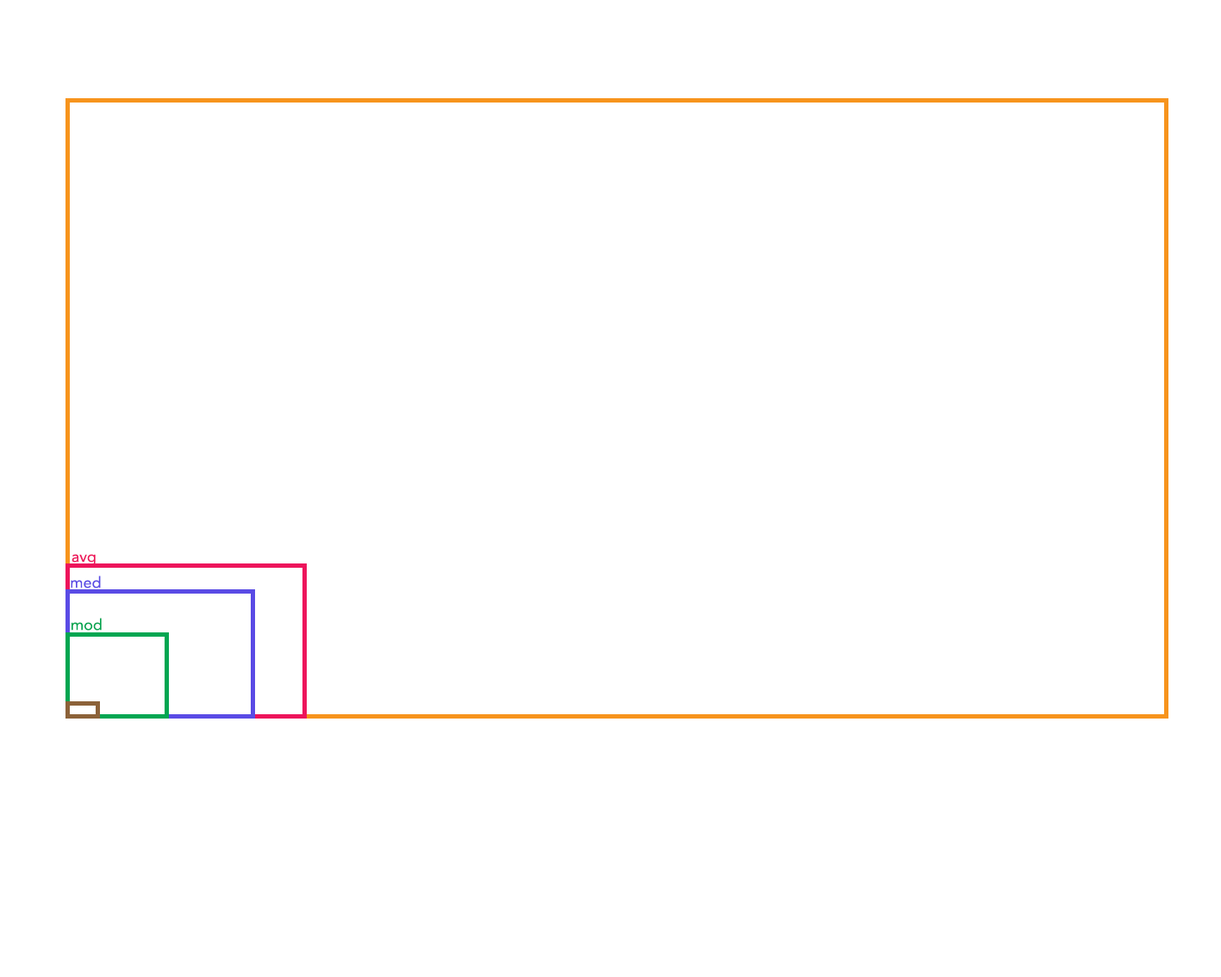
<style>
.page{position:relative;width:1221px;height:977px;background:#ffffff}
.page>*{position:absolute;margin:0}
.t1{font:15.5px "Avenir-Roman";color:#ed145b}
.t2{font:15.5px "Avenir-Roman";color:#5a4be5}
.t3{font:15.5px "Avenir-Roman";color:#00a651}
</style>
<div class="page">
<p class="t1" style="left:71px;top:554px;width:25px;height:12px">avg</p>
<p class="t2" style="left:71px;top:575px;width:30px;height:13px">med</p>
<p class="t3" style="left:71px;top:618px;width:31px;height:13px">mod</p>
</div>
